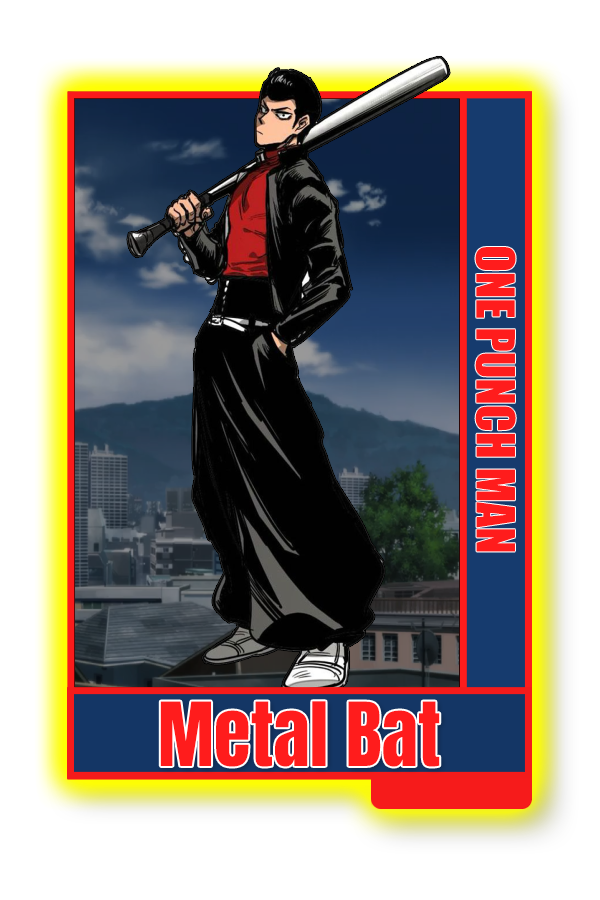
<style>
.page{position:relative;width:600px;height:900px;background:#ffffff}
.page>*{position:absolute;margin:0}
.t1{font:48.8px "Impact";color:#ff1c1c}
.t2{font:75px "Impact";color:#ff1c1c}
</style>
<div class="page">
<p class="t1" style="left:475px;top:246px;width:41px;height:306px;rotate:90deg">ONE PUNCH MAN</p>
<p class="t2" style="left:160px;top:701px;width:280px;height:66px">Metal Bat</p>
</div>
